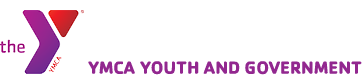
<style>
.page{position:relative;width:362px;height:82px;background:#ffffff}
.page>*{position:absolute;margin:0}
.t1{font:18px "Cachet-Bold";letter-spacing:-0.002em;color:#92278f}
</style>
<div class="page">
<p class="t1" style="left:88px;top:61px;width:274px;height:14px">YMCA YOUTH AND GOVERNMENT</p>
</div>
